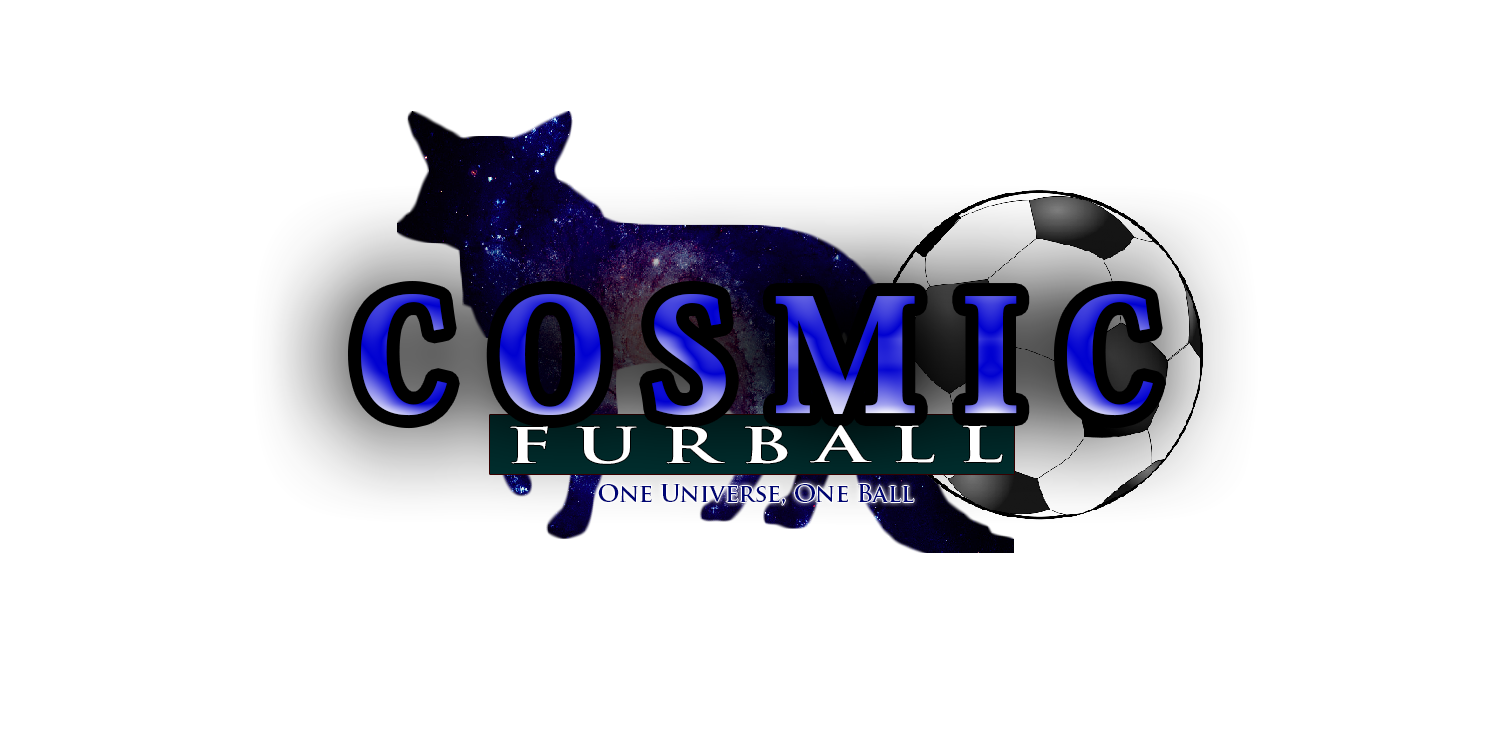
<style>
.page{position:relative;width:1500px;height:750px;background:#ffffff}
.page>*{position:absolute;margin:0}
.t1{font:155px "KozMinPr6N-Heavy"}
.t2{font:48px "TrajanPro-Bold";color:#ffffff;scale:1.56 1}
.t3{font:24px "TrajanPro-Bold";color:#000573}
</style>
<div class="page">
<p class="t1" style="left:361px;top:294px;width:792px;height:122px">C O S M I C</p>
<p class="t2" style="left:510px;top:425px;width:493px;height:39px">F U R B A L L</p>
<p class="t3" style="left:598px;top:484px;width:316px;height:21px">One Universe, One Ball</p>
</div>
